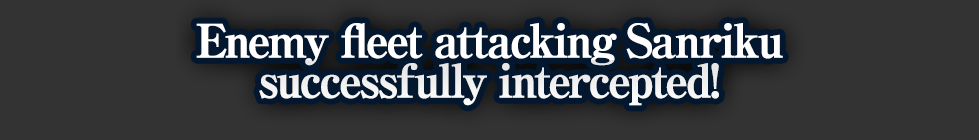
<style>
.page{position:relative;width:979px;height:140px;background:#333333}
.page>*{position:absolute;margin:0}
.t1{font:46px/40px "RyuminPro-ExBold";letter-spacing:-0.08em;color:#ffffff;font-weight:bold}
</style>
<div class="page">
<p class="t1" style="left:196px;top:23px;width:587px;height:83px;text-align:center">Enemy fleet attacking Sanriku<br>successfully intercepted!</p>
</div>
